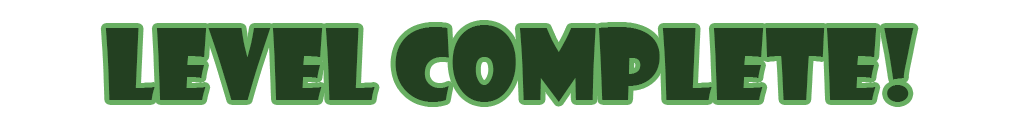
<style>
.page{position:relative;width:1024px;height:128px;background:#ffffff}
.page>*{position:absolute;margin:0}
.t1{font:96px "ShowcardGothic-Reg";color:#234021}
</style>
<div class="page">
<p class="t1" style="left:105px;top:25px;width:809px;height:77px">LEVEL COMPLETE!</p>
</div>
